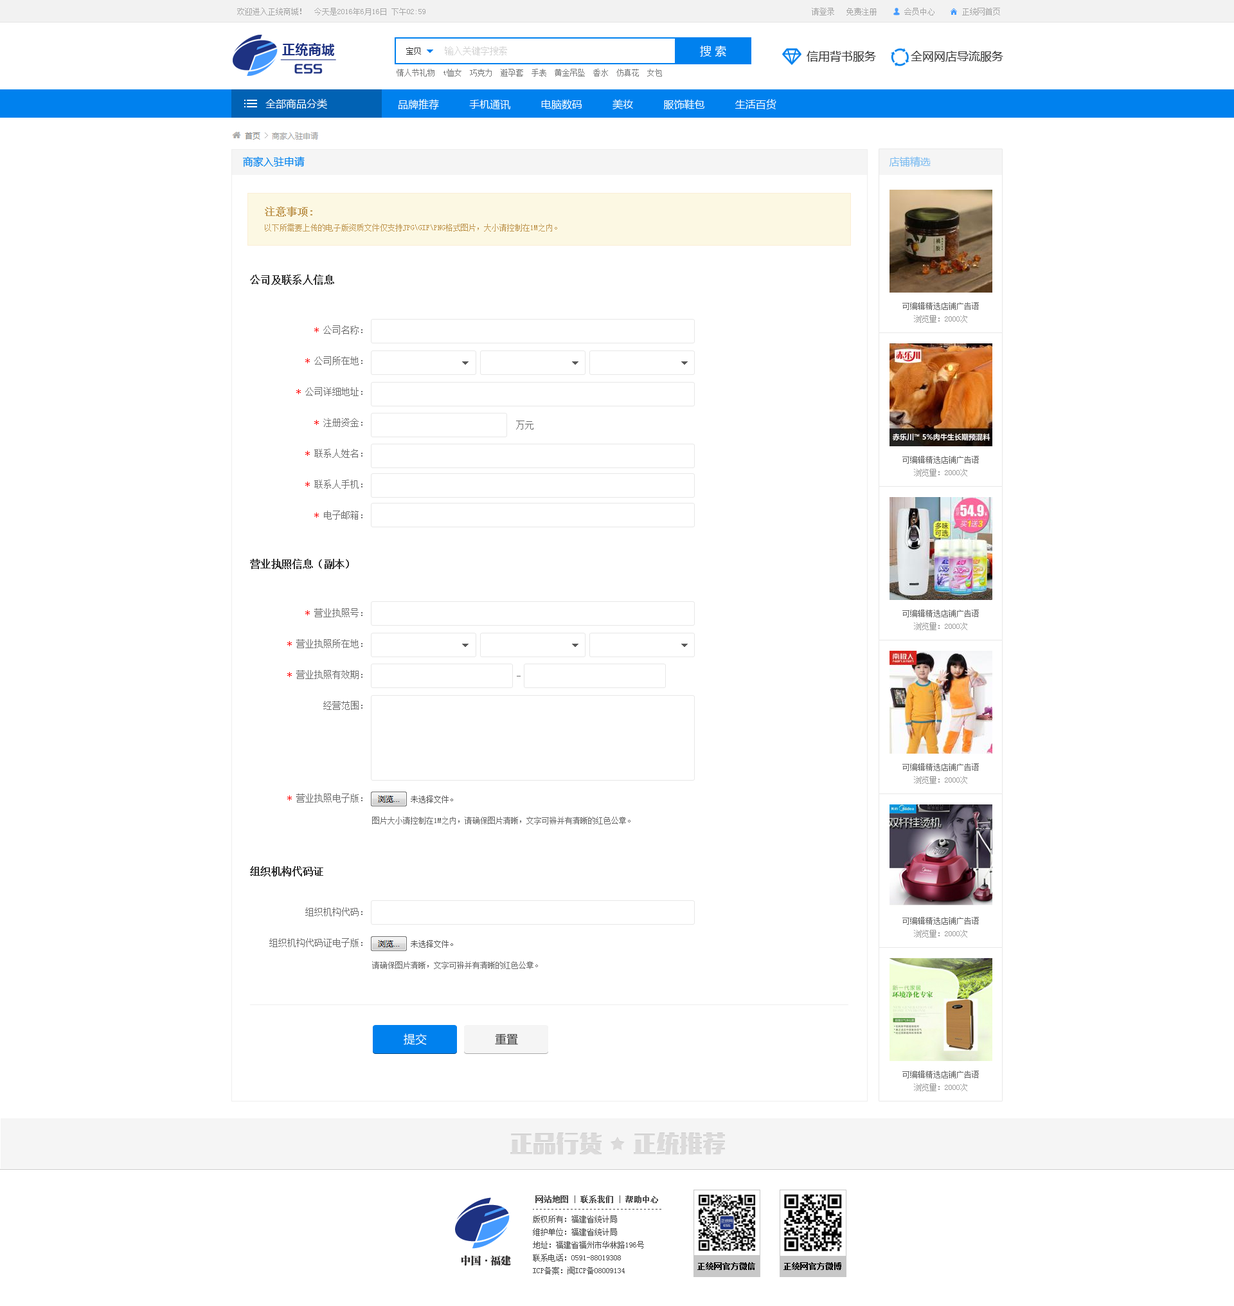
<style>
.page{position:relative;width:1234px;height:1306px;background:#ffffff}
.page>*{position:absolute;margin:0}
.t1{font:7.7px "SimSun";color:#a6a6a6}
.t2{font:12.9px "MicrosoftYaHei-Bold";letter-spacing:0.02em;color:#1e3282}
.t3{font:7.7px "SimSun";color:#333333}
.t4{font:9px "SimSun";color:#d2d2d2}
.t5{font:11.6px "MicrosoftYaHei";color:#ffffff}
.t6{font:11.6px "MicrosoftYaHei";color:#333333}
.t7{font:7.7px "SimSun";color:#7a7b7b}
.t8{font:10.3px "MicrosoftYaHei";color:#ffffff}
.t9{font:10.3px "MicrosoftYaHei";color:#0081ee}
.t10{font:10.3px "MicrosoftYaHei";color:#7abbf1}
.t11{font:10.3px "SimSun";color:#c09853;font-weight:bold}
.t12{font:7.7px "SimSun";color:#c09853}
.t13{font:10.3px "SimSun";letter-spacing:-0.04em;color:#333333;font-weight:bold}
.t14{font:7.7px "SimSun";color:#666666}
.t15{font:7.7px "SimSun";color:#999999}
.t16{font:9px/30.9px "SimSun";color:#6b6b6b}
.t17{font:9px/30.9px "SimSun";color:#ff0000}
.t18{font:9px "SimSun";color:#6b6b6b}
.t19{font:7.7px "SimSun";color:#6b6b6b}
.t20{font:23.1px "MFLiHei_Noncommercial-Regular";color:#cccbcb}
</style>
<div class="page">
<p class="t1" style="left:237px;top:8px;width:189px;height:7px">欢迎进入正统商城！  今天是2016年6月16日 下午02:59</p>
<p class="t1" style="left:812px;top:8px;width:188px;height:7px">请登录   免费注册       会员中心       正统网首页</p>
<p class="t2" style="left:282px;top:43px;width:53px;height:13px">正统商城</p>
<p class="t3" style="left:406px;top:47px;width:15px;height:8px">宝贝</p>
<p class="t4" style="left:445px;top:46px;width:62px;height:9px">输入关键字搜索</p>
<p class="t5" style="left:700px;top:45px;width:26px;height:12px">搜 索</p>
<p class="t6" style="left:807px;top:51px;width:69px;height:11px">信用背书服务</p>
<p class="t6" style="left:911px;top:51px;width:93px;height:11px">全网网店导流服务</p>
<p class="t7" style="left:397px;top:69px;width:265px;height:7px">情人节礼物  t恤女  巧克力  避孕套  手表  黄金吊坠  香水  仿真花  女包</p>
<p class="t8" style="left:266px;top:98px;width:61px;height:11px">全部商品分类</p>
<p class="t8" style="left:399px;top:99px;width:378px;height:11px">品牌推荐          手机通讯          电脑数码          美妆          服饰鞋包          生活百货</p>
<p class="t9" style="left:243px;top:156px;width:62px;height:11px">商家入驻申请</p>
<p class="t10" style="left:889px;top:156px;width:42px;height:11px">店铺精选</p>
<p class="t11" style="left:265px;top:206px;width:47px;height:11px">注意事项:</p>
<p class="t12" style="left:265px;top:224px;width:292px;height:7px">以下所需要上传的电子版资质文件仅支持JPG\GIF\PNG格式图片，大小请控制在1M之内。</p>
<p class="t13" style="left:250px;top:274px;width:84px;height:11px">公司及联系人信息</p>
<p class="t14" style="left:903px;top:302px;width:76px;height:8px">可编辑精选店铺广告语</p>
<p class="t15" style="left:914px;top:315px;width:54px;height:8px">浏览量：2000次</p>
<p class="t16" style="left:296px;top:325px;width:67px;height:194px;text-align:right"><span class="t17">* </span>公司名称：<br><span class="t17">* </span>公司所在地：<br><span class="t17">* </span>公司详细地址：<br><span class="t17">* </span>注册资金：<br><span class="t17">* </span>联系人姓名：<br><span class="t17">* </span>联系人手机：<br><span class="t17">* </span>电子邮箱：</p>
<p class="t18" style="left:516px;top:420px;width:18px;height:9px">万元</p>
<p class="t14" style="left:903px;top:456px;width:76px;height:8px">可编辑精选店铺广告语</p>
<p class="t15" style="left:914px;top:469px;width:54px;height:7px">浏览量：2000次</p>
<p class="t13" style="left:250px;top:559px;width:99px;height:10px">营业执照信息（副本）</p>
<p class="t16" style="left:287px;top:608px;width:76px;height:194px;text-align:right"><span class="t17">* </span>营业执照号：<br><span class="t17">* </span>营业执照所在地：<br><span class="t17">* </span>营业执照有效期：<br>经营范围：<br><br><br><span class="t17">* </span>营业执照电子版：</p>
<p class="t14" style="left:903px;top:609px;width:76px;height:8px">可编辑精选店铺广告语</p>
<p class="t15" style="left:914px;top:622px;width:54px;height:8px">浏览量：2000次</p>
<p class="t14" style="left:903px;top:763px;width:76px;height:8px">可编辑精选店铺广告语</p>
<p class="t15" style="left:914px;top:776px;width:54px;height:8px">浏览量：2000次</p>
<p class="t19" style="left:372px;top:816px;width:259px;height:8px">图片大小请控制在1M之内，请确保图片清晰，文字可辨并有清晰的红色公章。</p>
<p class="t13" style="left:250px;top:866px;width:73px;height:10px">组织机构代码证</p>
<p class="t16" style="left:269px;top:907px;width:94px;height:40px;text-align:right">组织机构代码：<br>组织机构代码证电子版：</p>
<p class="t14" style="left:903px;top:917px;width:76px;height:7px">可编辑精选店铺广告语</p>
<p class="t15" style="left:914px;top:930px;width:54px;height:7px">浏览量：2000次</p>
<p class="t19" style="left:372px;top:961px;width:166px;height:8px">请确保图片清晰，文字可辨并有清晰的红色公章。</p>
<p class="t5" style="left:404px;top:1033px;width:23px;height:12px">提交</p>
<p class="t6" style="left:495px;top:1034px;width:23px;height:11px">重置</p>
<p class="t14" style="left:903px;top:1070px;width:76px;height:8px">可编辑精选店铺广告语</p>
<p class="t15" style="left:914px;top:1083px;width:54px;height:8px">浏览量：2000次</p>
<p class="t20" style="left:510px;top:1132px;width:215px;height:23px;opacity:0.62">正品行货      正统推荐</p>
</div>
